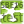
<style>
.page{position:relative;width:24px;height:24px}
.page>*{position:absolute;margin:0}
.t1{font:9px "Calibri"}
.t2{font:14px "Calibri"}
</style>
<div class="page">
<p class="t1" style="left:0px;top:2px;width:24px;height:6px">SBE16</p>
<p class="t2" style="left:1px;top:13px;width:22px;height:9px">test</p>
</div>
